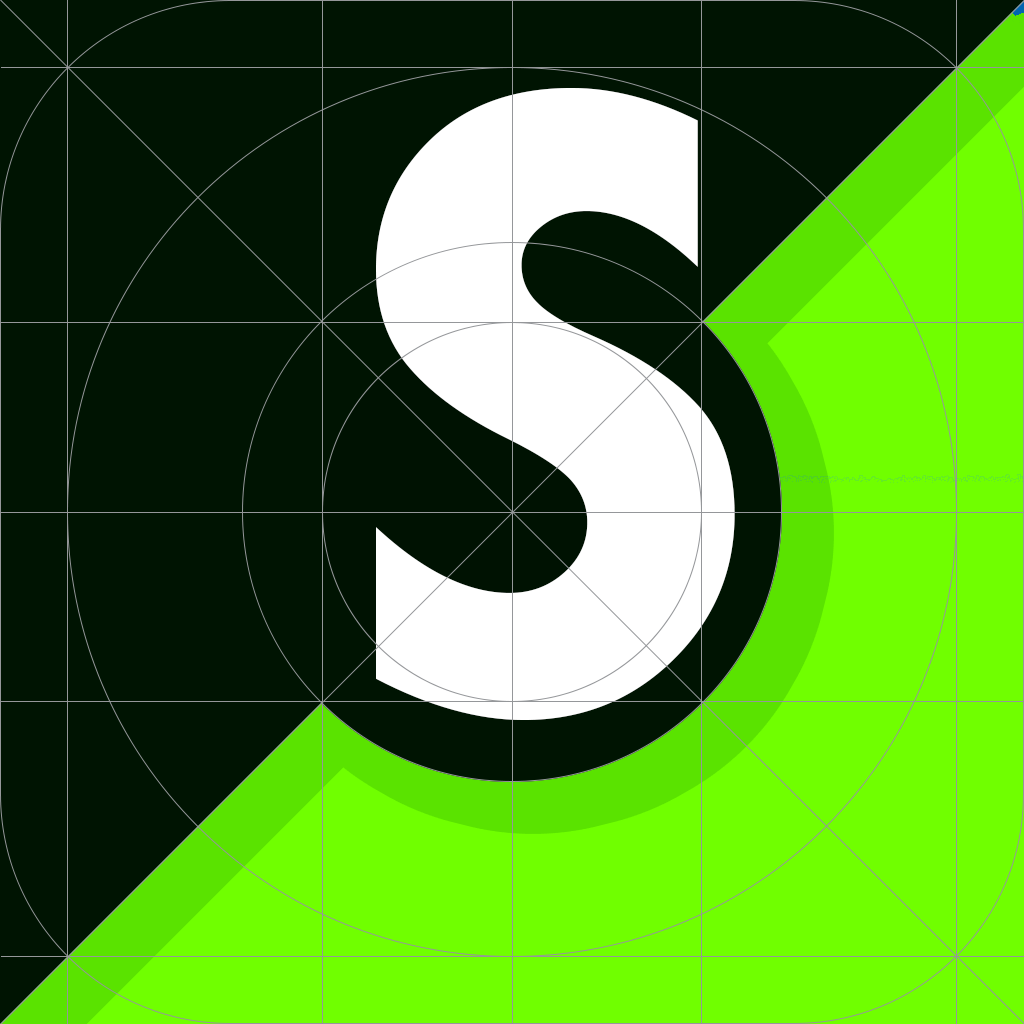
<style>
.page{position:relative;width:1024px;height:1024px;background:#001402}
.page>*{position:absolute;margin:0}
.t1{font:900px "AbadiMT-CondensedExtraBold";color:#ffffff}
</style>
<div class="page">
<p class="t1" style="left:376px;top:88px;width:359px;height:632px">S</p>
</div>
